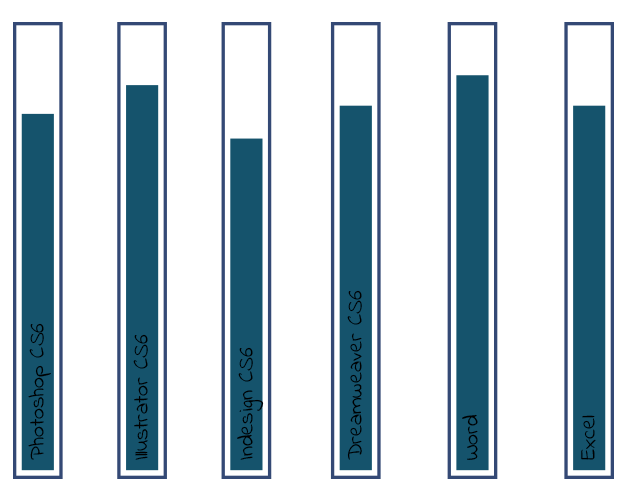
<style>
.page{position:relative;width:626px;height:500px;background:#ffffff}
.page>*{position:absolute;margin:0}
.t1{font:16.1px "IndieFlower";color:#000000}
</style>
<div class="page">
<p class="t1" style="left:347px;top:290px;width:15px;height:170px;rotate:-90deg">Dreamweaver CS6</p>
<p class="t1" style="left:28px;top:323px;width:23px;height:137px;rotate:-90deg">Photoshop CS6</p>
<p class="t1" style="left:133px;top:334px;width:15px;height:126px;rotate:-90deg">Illustrator CS6</p>
<p class="t1" style="left:237px;top:347px;width:27px;height:113px;rotate:-90deg">Indesign CS6</p>
<p class="t1" style="left:462px;top:414px;width:16px;height:46px;rotate:-90deg">Word</p>
<p class="t1" style="left:581px;top:415px;width:15px;height:45px;rotate:-90deg">Excel</p>
</div>
